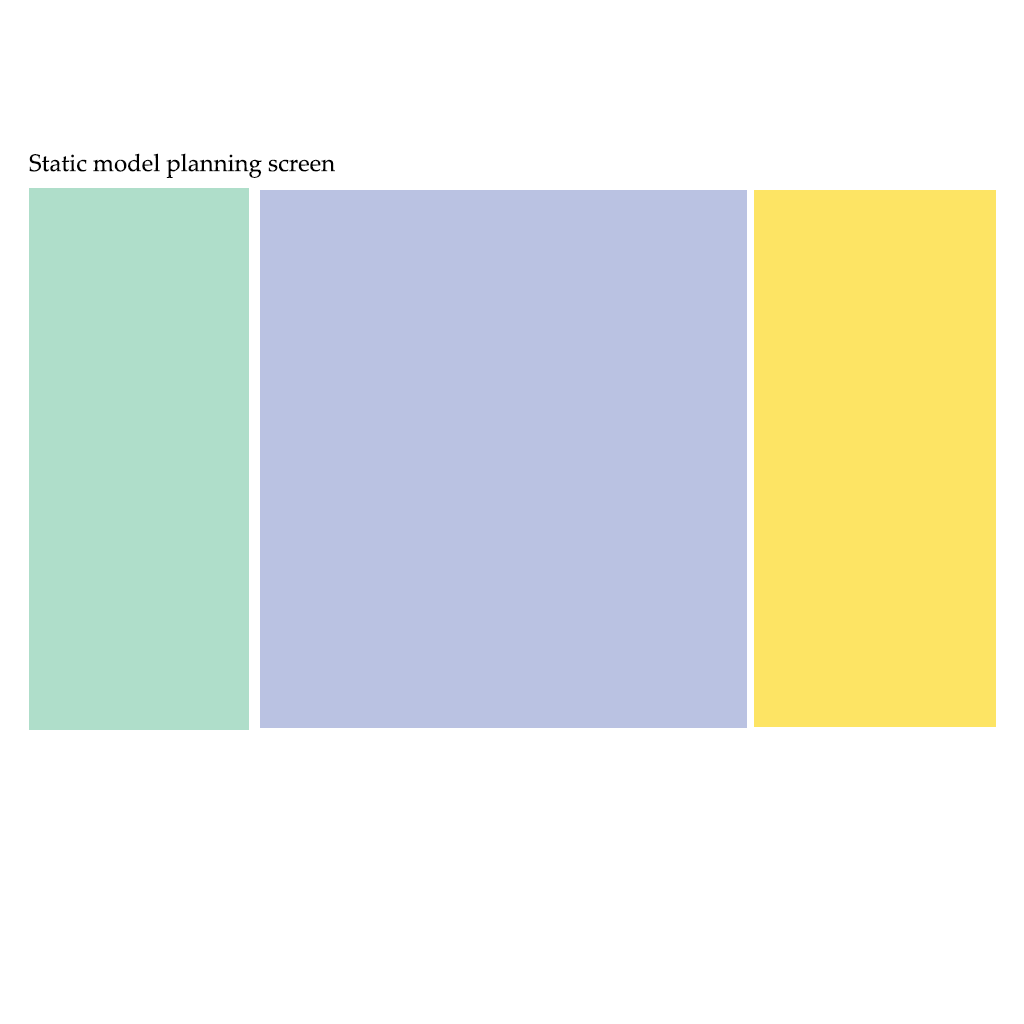
<style>
.page{position:relative;width:1024px;height:1024px;background:#ffffff}
.page>*{position:absolute;margin:0}
.t1{font:24px "PalatinoLinotype-Roman";color:#000000}
</style>
<div class="page">
<p class="t1" style="left:29px;top:153px;width:306px;height:25px">Static model planning screen</p>
</div>
